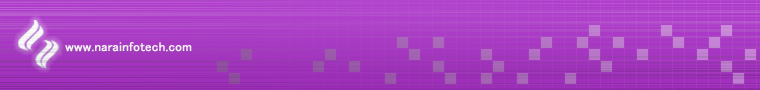
<style>
.page{position:relative;width:760px;height:90px}
.page>*{position:absolute;margin:0}
.t1{font:13px "MS-PGothic";color:#ffffff;font-weight:bold}
</style>
<div class="page">
<p class="t1" style="left:65px;top:42px;width:127px;height:10px">www.narainfotech.com</p>
</div>
